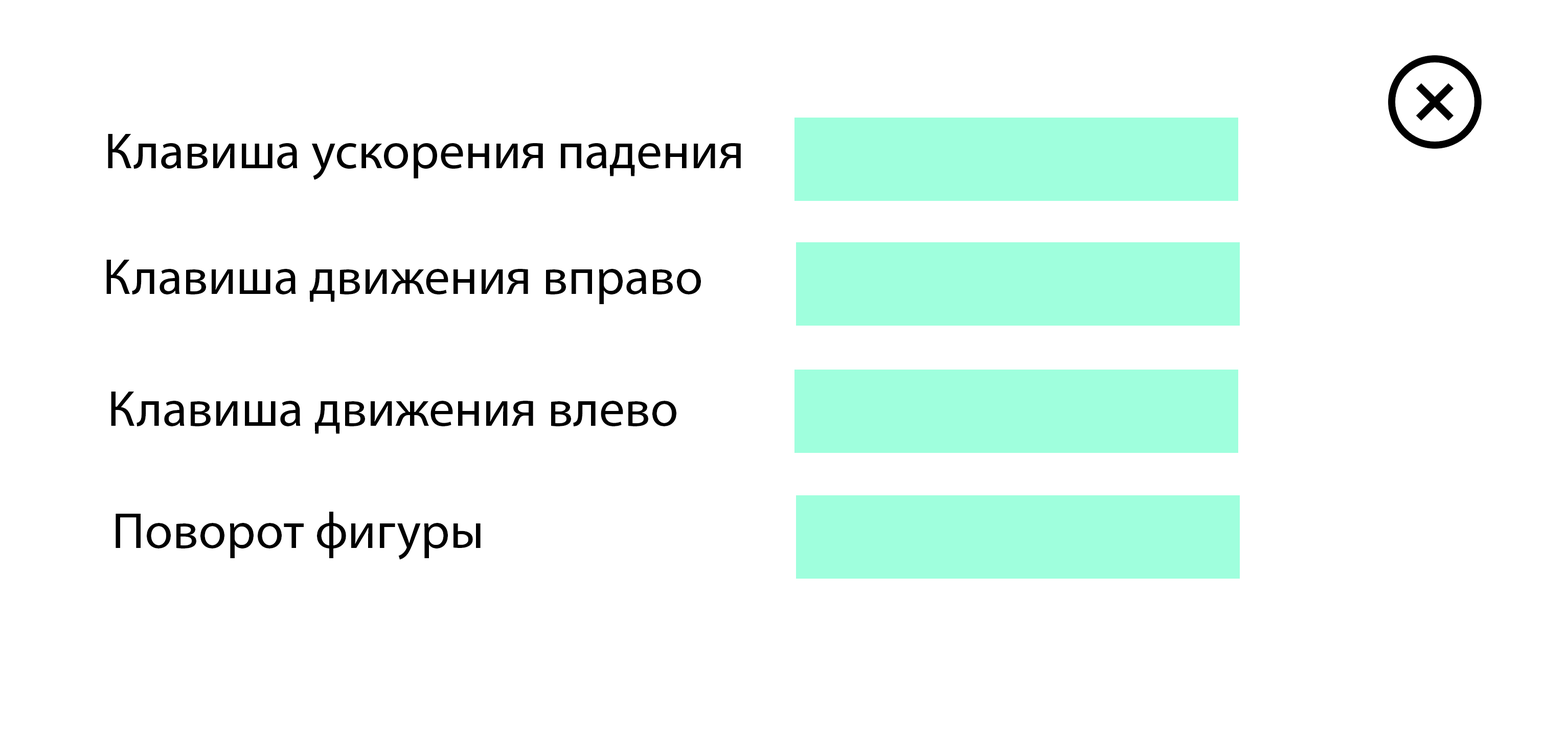
<style>
.page{position:relative;width:1568px;height:756px;background:#ffffff}
.page>*{position:absolute;margin:0}
.t1{font:51.1px "MyriadPro-Regular";color:#000000}
</style>
<div class="page">
<p class="t1" style="left:106px;top:260px;width:595px;height:44px">Клавиша движения вправо</p>
<p class="t1" style="left:111px;top:392px;width:565px;height:42px">Клавиша движения влево</p>
<p class="t1" style="left:116px;top:512px;width:365px;height:48px">Поворот фигуры</p>
</div>
